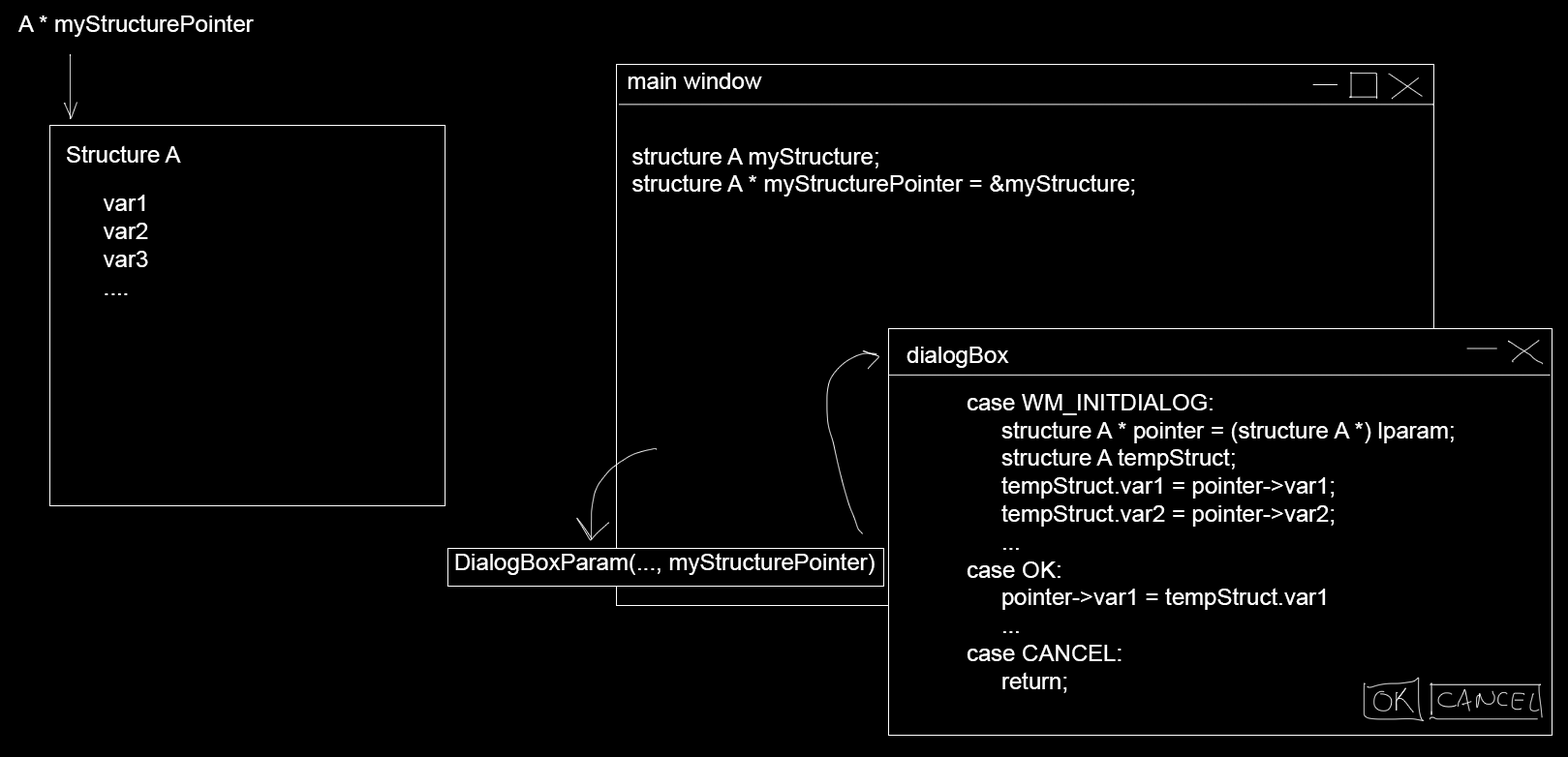
<style>
.page{position:relative;width:1568px;height:757px;background:#000000}
.page>*{position:absolute;margin:0}
.t1{font:23.2px "ArialMT";color:#ffffff}
</style>
<div class="page">
<p class="t1" style="left:18px;top:15px;width:236px;height:22px">A * myStructurePointer</p>
<p class="t1" style="left:628px;top:73px;width:134px;height:16px">main window</p>
<p class="t1" style="left:67px;top:145px;width:114px;height:18px">Structure A</p>
<p class="t1" style="left:632px;top:147px;width:503px;height:50px">structure A myStructure;<br>structure A * myStructurePointer = &amp;myStructure;</p>
<p class="t1" style="left:103px;top:195px;width:45px;height:100px">var1<br>var2<br>var3<br>....</p>
<p class="t1" style="left:907px;top:347px;width:102px;height:21px">dialogBox</p>
<p class="t1" style="left:967px;top:394px;width:487px;height:299px">case WM_INITDIALOG:<br> structure A * pointer = (structure A *) lparam;<br> structure A tempStruct;<br> tempStruct.var1 = pointer-&gt;var1;<br> tempStruct.var2 = pointer-&gt;var2;<br> ...<br>case OK:<br> pointer-&gt;var1 = tempStruct.var1<br> ...<br>case CANCEL:<br> return;</p>
<p class="t1" style="left:455px;top:553px;width:420px;height:22px">DialogBoxParam(..., myStructurePointer)</p>
</div>
